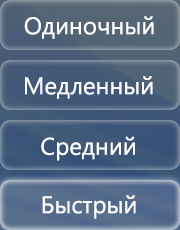
<style>
.page{position:relative;width:180px;height:230px}
.page>*{position:absolute;margin:0}
.t1{font:24px "SegoeUI";color:#ffffff}
</style>
<div class="page">
<p class="t1" style="left:24px;top:16px;width:130px;height:23px">Одиночный</p>
<p class="t1" style="left:25px;top:76px;width:128px;height:23px">Медленный</p>
<p class="t1" style="left:41px;top:136px;width:94px;height:25px">Средний</p>
<p class="t1" style="left:42px;top:195px;width:94px;height:24px">Быстрый</p>
</div>
